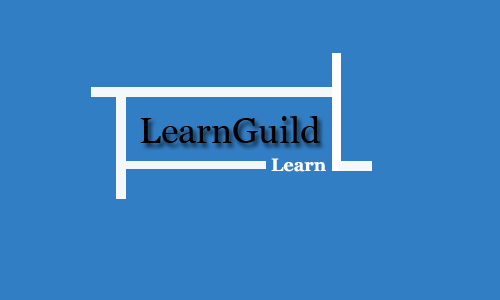
<style>
.page{position:relative;width:500px;height:300px;background:#327ec5}
.page>*{position:absolute;margin:0}
.t1{font:36px "Vani";color:#000000}
.t2{font:18px "Vani-Bold";color:#fbfbfb}
</style>
<div class="page">
<p class="t1" style="left:140px;top:116px;width:181px;height:27px">LearnGuild</p>
<p class="t2" style="left:271px;top:158px;width:55px;height:14px">Learn</p>
</div>
